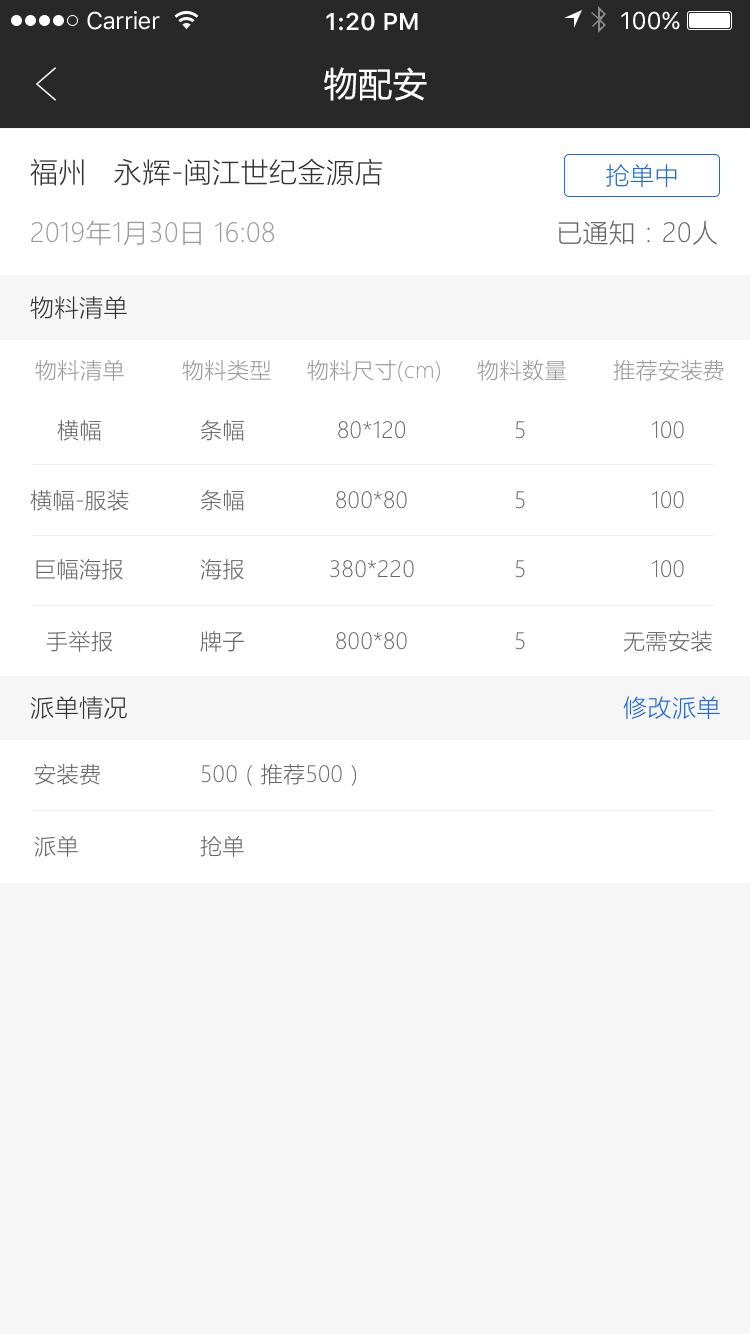
<style>
.page{position:relative;width:750px;height:1334px;background:#f6f6f6}
.page>*{position:absolute;margin:0}
.t1{font:24px "SFUIText-Regular";letter-spacing:-0.025em;color:#ffffff}
.t2{font:24px "SFUIText-Semibold";color:#ffffff}
.t3{font:24px "SFUIText-Regular";color:#ffffff}
.t4{font:34px "MicrosoftYaHei";letter-spacing:0.02em;color:#ffffff}
.t5{font:28px "MicrosoftYaHeiLight";letter-spacing:0.02em;color:#333333}
.t6{font:24px "MicrosoftYaHeiLight";letter-spacing:0.02em;color:#2269d4}
.t7{font:26px "MicrosoftYaHeiLight";letter-spacing:0.02em;color:#999999}
.t8{font:26px "MicrosoftYaHeiLight";letter-spacing:0.02em;color:#666666}
.t9{font:24px "MicrosoftYaHeiLight";letter-spacing:0.02em;color:#333333}
.t10{font:22px "MicrosoftYaHeiLight";letter-spacing:0.02em;color:#999999}
.t11{font:22px "MicrosoftYaHeiLight";letter-spacing:0.02em;color:#666666}
</style>
<div class="page">
<p class="t1" style="left:87px;top:11px;width:73px;height:19px">Carrier</p>
<p class="t2" style="left:326px;top:12px;width:92px;height:19px">1:20 PM</p>
<p class="t3" style="left:621px;top:11px;width:59px;height:19px">100%</p>
<p class="t4" style="left:324px;top:67px;width:103px;height:34px">物配安</p>
<p class="t5" style="left:30px;top:158px;width:353px;height:28px">福州   永辉-闽江世纪金源店</p>
<p class="t6" style="left:606px;top:164px;width:71px;height:24px">抢单中</p>
<p class="t7" style="left:31px;top:220px;width:243px;height:26px">2019年1月30日 16:08</p>
<p class="t8" style="left:558px;top:220px;width:159px;height:25px">已通知：20人</p>
<p class="t9" style="left:30px;top:296px;width:97px;height:23px">物料清单</p>
<p class="t10" style="left:35px;top:359px;width:89px;height:22px">物料清单</p>
<p class="t10" style="left:182px;top:359px;width:89px;height:22px">物料类型</p>
<p class="t10" style="left:307px;top:359px;width:133px;height:23px">物料尺寸(cm)</p>
<p class="t10" style="left:477px;top:359px;width:89px;height:22px">物料数量</p>
<p class="t10" style="left:613px;top:359px;width:111px;height:22px">推荐安装费</p>
<p class="t11" style="left:57px;top:420px;width:44px;height:21px">横幅</p>
<p class="t11" style="left:200px;top:420px;width:44px;height:21px">条幅</p>
<p class="t11" style="left:338px;top:421px;width:68px;height:18px">80*120</p>
<p class="t11" style="left:515px;top:421px;width:10px;height:18px">5</p>
<p class="t11" style="left:652px;top:421px;width:32px;height:18px">100</p>
<p class="t11" style="left:30px;top:489px;width:99px;height:22px">横幅-服装</p>
<p class="t11" style="left:200px;top:490px;width:44px;height:21px">条幅</p>
<p class="t11" style="left:336px;top:491px;width:71px;height:18px">800*80</p>
<p class="t11" style="left:515px;top:491px;width:10px;height:18px">5</p>
<p class="t11" style="left:652px;top:491px;width:32px;height:18px">100</p>
<p class="t11" style="left:36px;top:558px;width:87px;height:22px">巨幅海报</p>
<p class="t11" style="left:200px;top:558px;width:44px;height:22px">海报</p>
<p class="t11" style="left:330px;top:560px;width:84px;height:18px">380*220</p>
<p class="t11" style="left:515px;top:560px;width:10px;height:18px">5</p>
<p class="t11" style="left:652px;top:560px;width:32px;height:18px">100</p>
<p class="t11" style="left:623px;top:630px;width:89px;height:22px">无需安装</p>
<p class="t11" style="left:46px;top:631px;width:67px;height:21px">手举报</p>
<p class="t11" style="left:200px;top:631px;width:44px;height:21px">牌子</p>
<p class="t11" style="left:336px;top:632px;width:71px;height:18px">800*80</p>
<p class="t11" style="left:515px;top:632px;width:10px;height:18px">5</p>
<p class="t9" style="left:30px;top:696px;width:97px;height:23px">派单情况</p>
<p class="t6" style="left:623px;top:696px;width:97px;height:23px">修改派单</p>
<p class="t11" style="left:34px;top:763px;width:66px;height:22px">安装费</p>
<p class="t11" style="left:201px;top:764px;width:156px;height:22px">500（推荐500）</p>
<p class="t11" style="left:34px;top:836px;width:44px;height:21px">派单</p>
<p class="t11" style="left:200px;top:835px;width:44px;height:22px">抢单</p>
</div>
